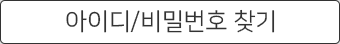
<style>
.page{position:relative;width:340px;height:44px;background:#ffffff}
.page>*{position:absolute;margin:0}
.t1{font:24px "NanumSquareR";color:#333333}
</style>
<div class="page">
<p class="t1" style="left:66px;top:9px;width:209px;height:24px">아이디/비밀번호 찾기</p>
</div>
